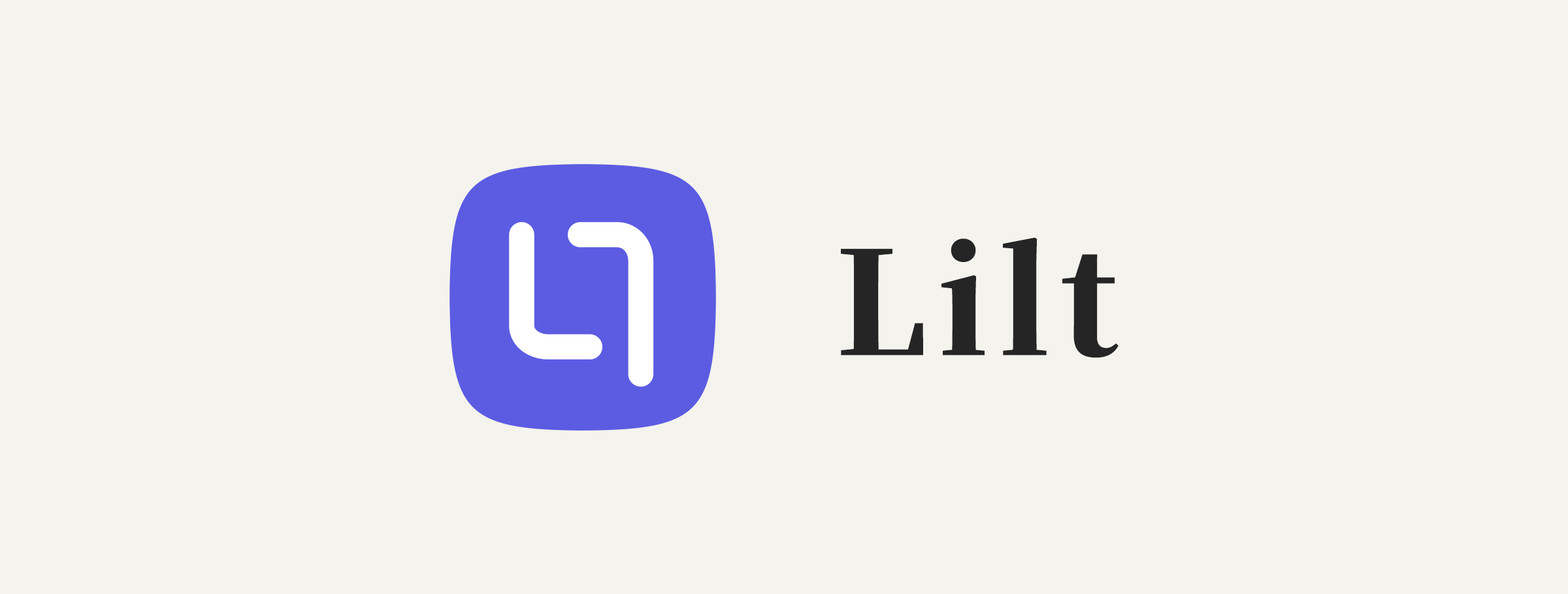
<style>
.page{position:relative;width:1568px;height:594px;background:#f5f3ed}
.page>*{position:absolute;margin:0}
.t1{font:142.1px "SourceHanSerifSCVF-Heavy";letter-spacing:0.07em;color:#252525}
</style>
<div class="page">
<p class="t1" style="left:841px;top:237px;width:278px;height:121px">Lilt</p>
</div>
